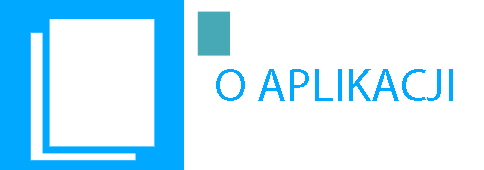
<style>
.page{position:relative;width:484px;height:170px;background:#ffffff}
.page>*{position:absolute;margin:0}
.t1{font:47.2px "MyriadPro-Regular";color:#00a8ff}
</style>
<div class="page">
<p class="t1" style="left:216px;top:69px;width:237px;height:32px">O APLIKACJI</p>
</div>
